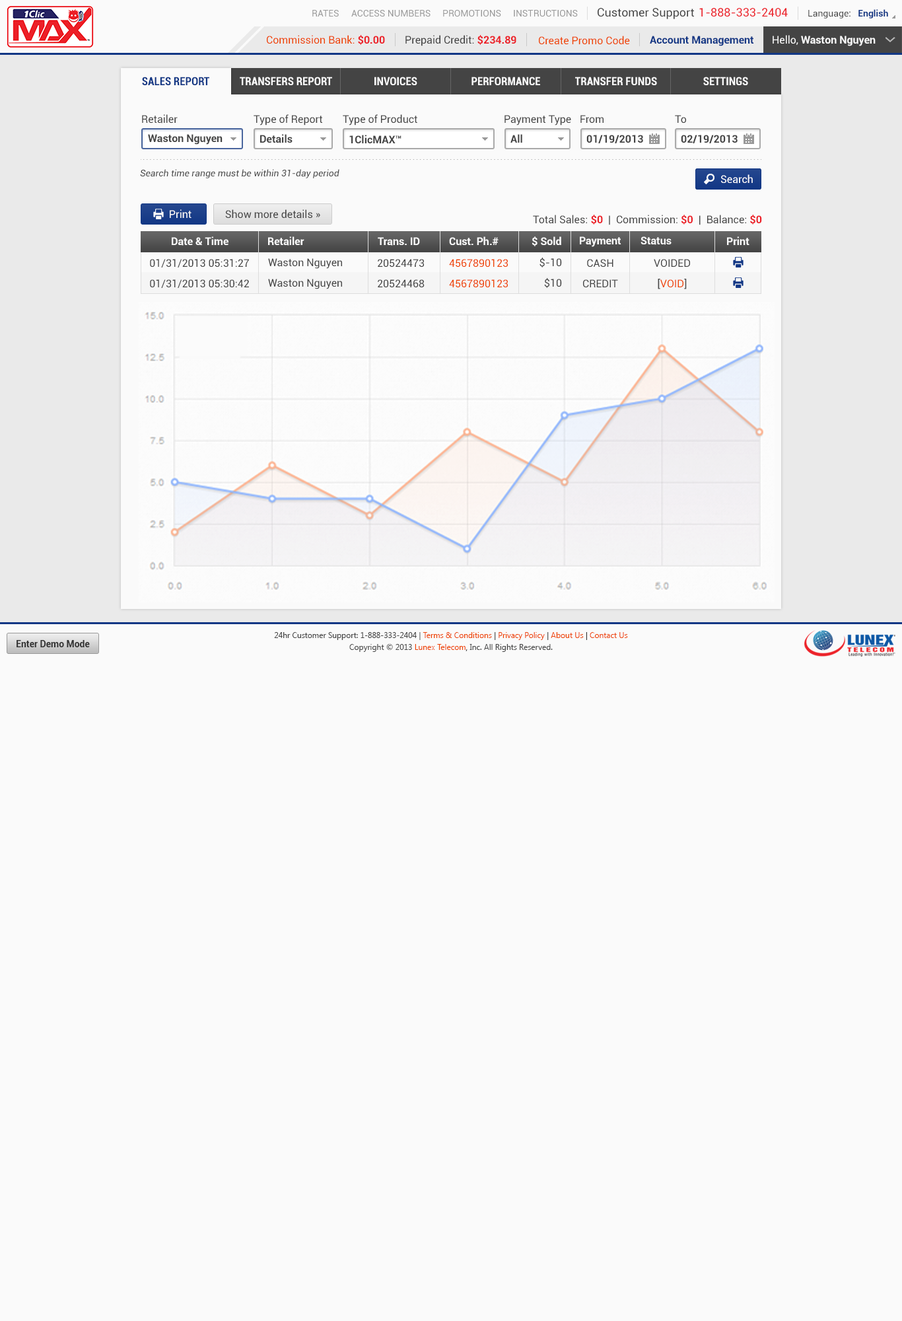
<style>
.page{position:relative;width:902px;height:1321px;background:#fafafa}
.page>*{position:absolute;margin:0}
.t1{font:9.2px "Roboto-Regular";color:#999999}
.t2{font:11.6px "Roboto-Regular";color:#444444}
.t3{font:11.6px "Roboto-Regular";color:#ec2029}
.t4{font:9.2px "Roboto-Regular";color:#444444}
.t5{font:9.2px "Roboto-Bold";color:#123785}
.t6{font:10.6px "Roboto-Regular";color:#ee4400}
.t7{font:10.6px "Roboto-Bold";color:#ec2028}
.t8{font:10.6px "Roboto-Regular";color:#444444}
.t9{font:10.6px "Roboto-Bold";color:#123785}
.t10{font:10.6px "Roboto-Bold";color:#fafafa}
.t11{font:10.6px "Roboto-Regular";color:#fafafa}
.t12{font:11.2px "Roboto-BoldCondensed";color:#123785}
.t13{font:11.2px "Roboto-BoldCondensed";color:#fafafa}
.t14{font:10.6px "Roboto-Bold";color:#444444}
.t15{font:9.2px "Roboto-Italic";color:#444444}
.t16{font:10.6px "Roboto-Regular";color:#ffffff}
.t17{font:9.2px "Roboto-Bold";color:#333333}
.t18{font:7.9px/11.9px "SegoeUI";color:#444444}
.t19{font:7.9px/11.9px "SegoeUI";color:#ee4400}
.t20{font:7.9px/11.9px "SegoeUI";color:#333333}
</style>
<div class="page">
<p class="t1" style="left:312px;top:10px;width:27px;height:7px">RATES</p>
<p class="t1" style="left:351px;top:10px;width:80px;height:7px">ACCESS NUMBERS</p>
<p class="t1" style="left:443px;top:10px;width:58px;height:7px">PROMOTIONS</p>
<p class="t1" style="left:514px;top:10px;width:64px;height:7px">INSTRUCTIONS</p>
<p class="t2" style="left:598px;top:8px;width:96px;height:11px">Customer Support</p>
<p class="t3" style="left:700px;top:8px;width:88px;height:9px">1-888-333-2404</p>
<p class="t4" style="left:809px;top:9px;width:80px;height:9px">Language:   <span class="t5">English</span></p>
<p class="t6" style="left:267px;top:35px;width:118px;height:10px">Commission Bank: <span class="t7">$0.00</span></p>
<p class="t8" style="left:406px;top:35px;width:111px;height:11px">Prepaid Credit: <span class="t7">$234.89</span></p>
<p class="t6" style="left:539px;top:36px;width:91px;height:9px">Create Promo Code</p>
<p class="t9" style="left:650px;top:36px;width:104px;height:10px">Account Management</p>
<p class="t10" style="left:773px;top:35px;width:103px;height:11px"><span class="t11">Hello, </span>Waston Nguyen</p>
<p class="t12" style="left:142px;top:77px;width:67px;height:8px">SALES REPORT</p>
<p class="t13" style="left:240px;top:77px;width:92px;height:8px">TRANSFERS REPORT</p>
<p class="t13" style="left:375px;top:77px;width:43px;height:8px">INVOICES</p>
<p class="t13" style="left:472px;top:77px;width:68px;height:8px">PERFORMANCE</p>
<p class="t13" style="left:575px;top:77px;width:82px;height:8px">TRANSFER FUNDS</p>
<p class="t13" style="left:704px;top:77px;width:45px;height:8px">SETTINGS</p>
<p class="t8" style="left:142px;top:114px;width:36px;height:10px">Retailer</p>
<p class="t8" style="left:254px;top:114px;width:69px;height:12px">Type of Report</p>
<p class="t8" style="left:343px;top:114px;width:75px;height:12px">Type of Product</p>
<p class="t8" style="left:505px;top:115px;width:66px;height:11px">Payment Type</p>
<p class="t8" style="left:581px;top:115px;width:23px;height:8px">From</p>
<p class="t8" style="left:675px;top:115px;width:11px;height:8px">To</p>
<p class="t14" style="left:148px;top:134px;width:75px;height:11px">Waston Nguyen</p>
<p class="t14" style="left:260px;top:134px;width:33px;height:9px">Details</p>
<p class="t14" style="left:349px;top:135px;width:53px;height:8px">1ClicMAX™</p>
<p class="t14" style="left:511px;top:134px;width:12px;height:9px">All</p>
<p class="t14" style="left:587px;top:135px;width:56px;height:8px">01/19/2013</p>
<p class="t14" style="left:681px;top:135px;width:57px;height:8px">02/19/2013</p>
<p class="t15" style="left:140px;top:169px;width:200px;height:9px">Search time range must be within 31-day period</p>
<p class="t16" style="left:721px;top:174px;width:32px;height:10px">Search</p>
<p class="t11" style="left:170px;top:209px;width:22px;height:9px">Print</p>
<p class="t8" style="left:225px;top:209px;width:95px;height:10px">Show more details »</p>
<p class="t8" style="left:533px;top:215px;width:229px;height:10px">Total Sales: <span class="t7">$0</span>  |  Commission: <span class="t7">$0</span>  |  Balance: <span class="t7">$0</span></p>
<p class="t10" style="left:172px;top:237px;width:57px;height:9px">Date &amp; Time</p>
<p class="t10" style="left:268px;top:237px;width:37px;height:9px">Retailer</p>
<p class="t10" style="left:378px;top:237px;width:42px;height:9px">Trans. ID</p>
<p class="t10" style="left:449px;top:237px;width:50px;height:9px">Cust. Ph.#</p>
<p class="t10" style="left:532px;top:237px;width:30px;height:9px">$ Sold</p>
<p class="t10" style="left:580px;top:237px;width:42px;height:10px">Payment</p>
<p class="t10" style="left:641px;top:237px;width:31px;height:8px">Status</p>
<p class="t10" style="left:727px;top:237px;width:23px;height:8px">Print</p>
<p class="t8" style="left:540px;top:258px;width:22px;height:10px">$-10</p>
<p class="t8" style="left:150px;top:259px;width:99px;height:9px">01/31/2013 05:31:27</p>
<p class="t8" style="left:268px;top:258px;width:74px;height:11px">Waston Nguyen</p>
<p class="t8" style="left:378px;top:259px;width:46px;height:8px">20524473</p>
<p class="t6" style="left:449px;top:259px;width:59px;height:8px">4567890123</p>
<p class="t8" style="left:587px;top:259px;width:27px;height:8px">CASH</p>
<p class="t8" style="left:654px;top:259px;width:36px;height:8px">VOIDED</p>
<p class="t8" style="left:150px;top:279px;width:99px;height:9px">01/31/2013 05:30:42</p>
<p class="t8" style="left:268px;top:279px;width:74px;height:10px">Waston Nguyen</p>
<p class="t8" style="left:378px;top:279px;width:47px;height:8px">20524468</p>
<p class="t6" style="left:449px;top:279px;width:59px;height:8px">4567890123</p>
<p class="t8" style="left:544px;top:278px;width:18px;height:10px">$10</p>
<p class="t8" style="left:583px;top:279px;width:35px;height:8px">CREDIT</p>
<p class="t6" style="left:658px;top:279px;width:29px;height:10px"><span class="t8">[</span>VOID<span class="t8">]</span></p>
<p class="t17" style="left:17px;top:640px;width:73px;height:7px">Enter Demo Mode</p>
<p class="t18" style="left:274px;top:632px;width:354px;height:20px;text-align:center">24hr Customer Support: 1-888-333-2404 | <span class="t19">Terms &amp; Conditions</span><span class="t20"> | </span><span class="t19">Privacy Policy</span><span class="t20"> | </span><span class="t19">About Us</span><span class="t20"> | </span><span class="t19">Contact Us<br></span>Copyright © 2013 <span class="t19">Lunex Telecom</span><span class="t20">,</span> Inc. All Rights Reserved.</p>
</div>
